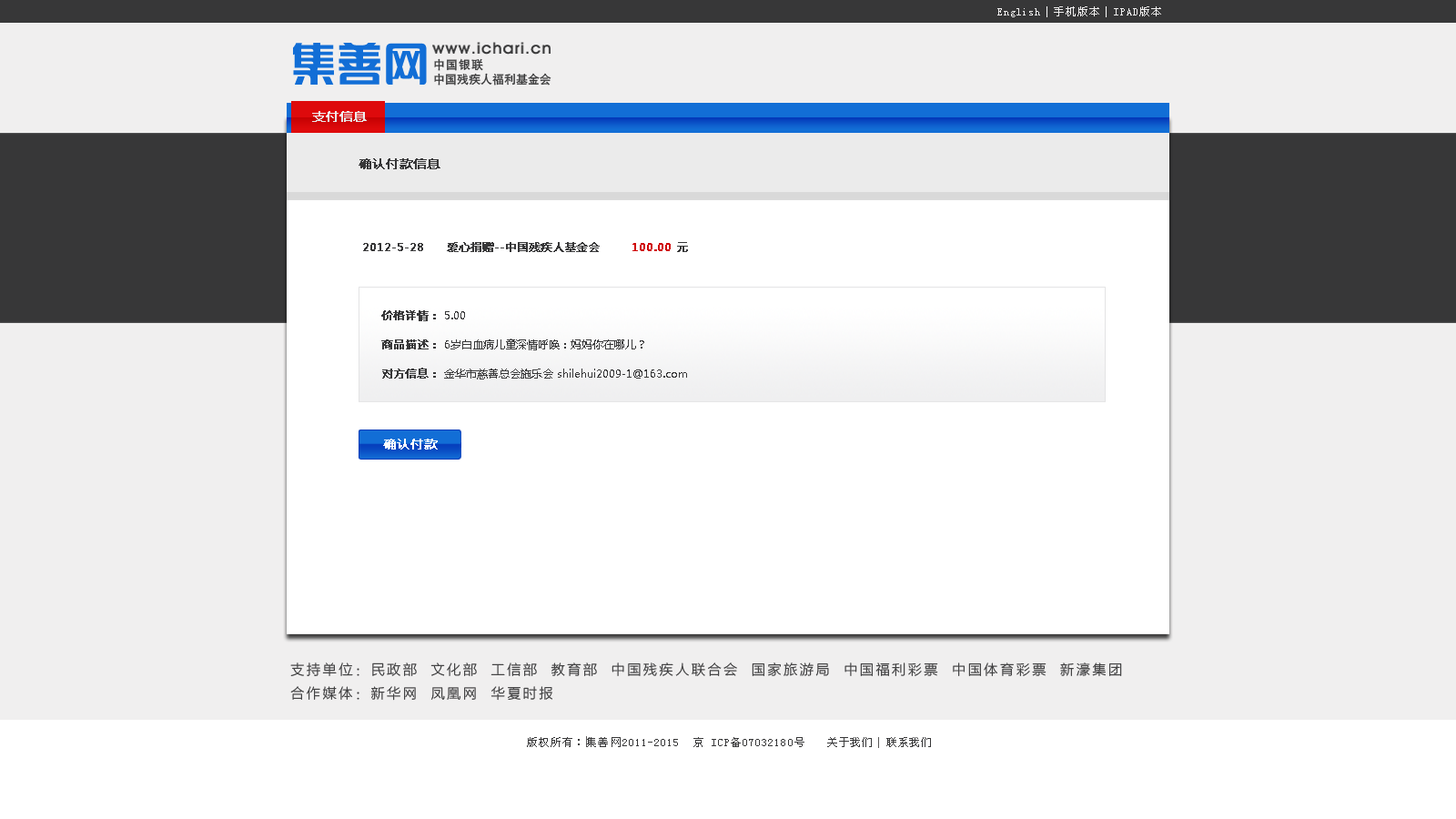
<style>
.page{position:relative;width:1456px;height:819px;background:#ffffff}
.page>*{position:absolute;margin:0}
.t1{font:10.9px "SimSun";letter-spacing:0.09em;color:#f0efef}
.t2{font:10.9px "SimSun";letter-spacing:0.07em;color:#f0efef}
.t3{font:11.8px "HeitiCSEG-Medium-GB";letter-spacing:0.08em;color:#373738}
.t4{font:11.8px "HeitiCSEG-Medium-GB";color:#373738}
.t5{font:12.7px "MicrosoftYaHei";color:#f0efef;font-weight:bold}
.t6{font:12.7px "MicrosoftYaHei";color:#373738;font-weight:bold}
.t7{font:10.9px "MicrosoftYaHei";color:#373738;text-transform:uppercase;font-weight:bold}
.t8{font:10.9px "MicrosoftYaHei";color:#d00507;text-transform:uppercase;font-weight:bold}
.t9{font:10.9px/29.1px "MicrosoftYaHei";color:#373738}
.t10{font:10.9px/29.1px "MicrosoftYaHei";color:#373738;font-weight:bold}
.t11{font:12.7px "MicrosoftYaHei";color:#ffffff;font-weight:bold}
.t12{font:14px/23.4px "FZLTXHK--GBK1-0";letter-spacing:0.15em;color:#373738}
.t13{font:10.9px "SimSun";letter-spacing:0.09em;color:#373738}
.t14{font:10.9px "SimSun";letter-spacing:0.07em;color:#373738}
</style>
<div class="page">
<p class="t1" style="left:997px;top:6px;width:164px;height:11px"><span class="t2">English  </span>手机版本  IPAD版本</p>
<p class="t3" style="left:434px;top:58px;width:49px;height:13px">中国银联</p>
<p class="t4" style="left:434px;top:73px;width:117px;height:13px">中国残疾人福利基金会</p>
<p class="t5" style="left:312px;top:111px;width:55px;height:11px">支付信息</p>
<p class="t6" style="left:359px;top:158px;width:81px;height:11px">确认付款信息</p>
<p class="t7" style="left:363px;top:242px;width:325px;height:10px">2012-5-28     爱心捐赠--中国残疾人基金会      <span class="t8"> 100.00</span> 元</p>
<p class="t9" style="left:381px;top:310px;width:306px;height:69px"><span class="t10">价格详情：</span> 5.00<br><span class="t10">商品描述：</span> 6岁白血病儿童深情呼唤：妈妈你在哪儿？<br><span class="t10">对方信息：</span> 金华市慈善总会施乐会 shilehui2009-1@163.com</p>
<p class="t11" style="left:383px;top:439px;width:55px;height:11px">确认付款</p>
<p class="t12" style="left:290px;top:662px;width:832px;height:39px">支持单位：民政部  文化部  工信部  教育部  中国残疾人联合会  国家旅游局  中国福利彩票  中国体育彩票  新濠集团  <br>合作媒体：新华网  凤凰网  华夏时报</p>
<p class="t13" style="left:527px;top:737px;width:277px;height:10px">版权所有：集善网2011-2015  京 ICP备07032180号</p>
<p class="t14" style="left:827px;top:737px;width:104px;height:10px">关于我们  联系我们</p>
</div>
